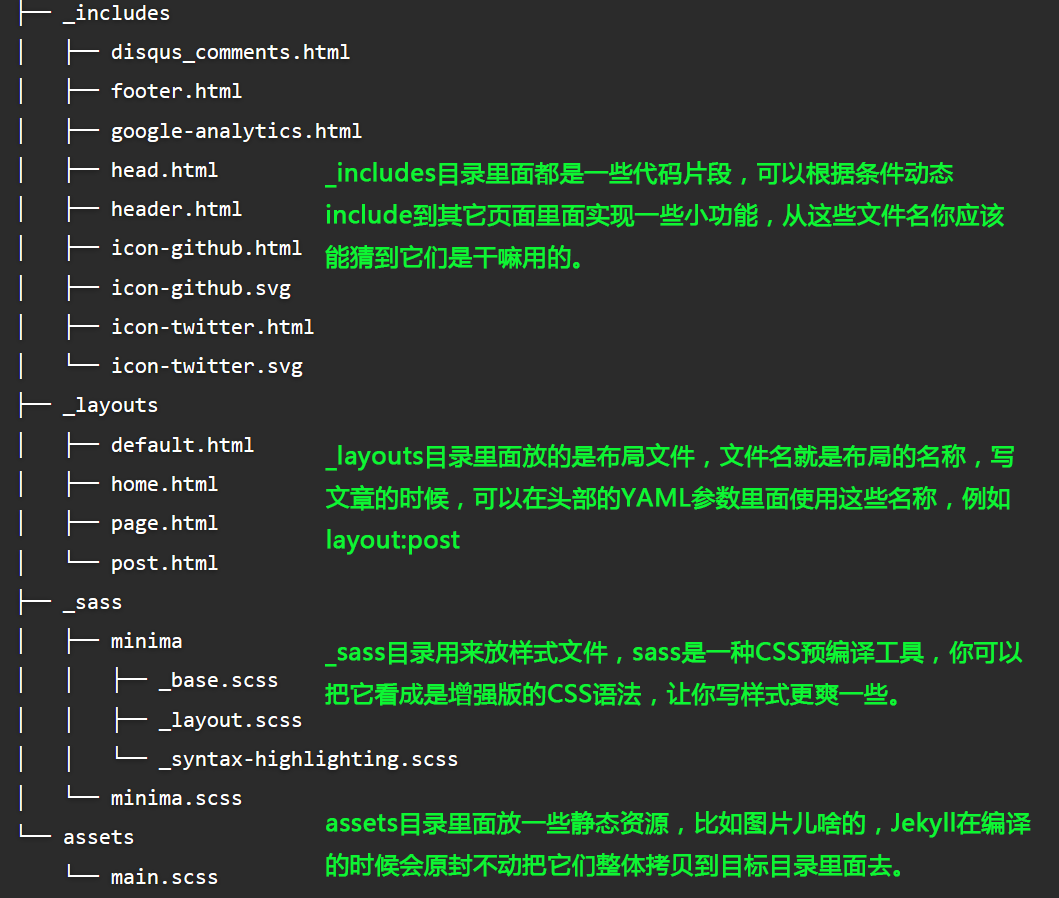
<style>
.page{position:relative;width:1059px;height:898px;background:#2b2b2b}
.page>*{position:absolute;margin:0}
.t1{font:24px "MicrosoftYaHei";color:#0df633;font-weight:bold}
</style>
<div class="page">
<p class="t1" style="left:325px;top:161px;width:679px;height:108px">_includes目录里面都是一些代码片段，可以根据条件动态<br>include到其它页面里面实现一些小功能，从这些文件名你应该<br>能猜到它们是干嘛用的。</p>
<p class="t1" style="left:325px;top:443px;width:689px;height:112px">_layouts目录里面放的是布局文件，文件名就是布局的名称，写<br>文章的时候，可以在头部的YAML参数里面使用这些名称，例如<br>layout:post</p>
<p class="t1" style="left:325px;top:639px;width:698px;height:68px">_sass目录用来放样式文件，sass是一种CSS预编译工具，你可以<br>把它看成是增强版的CSS语法，让你写样式更爽一些。</p>
<p class="t1" style="left:326px;top:811px;width:705px;height:67px">assets目录里面放一些静态资源，比如图片儿啥的，Jekyll在编译<br>的时候会原封不动把它们整体拷贝到目标目录里面去。</p>
</div>
